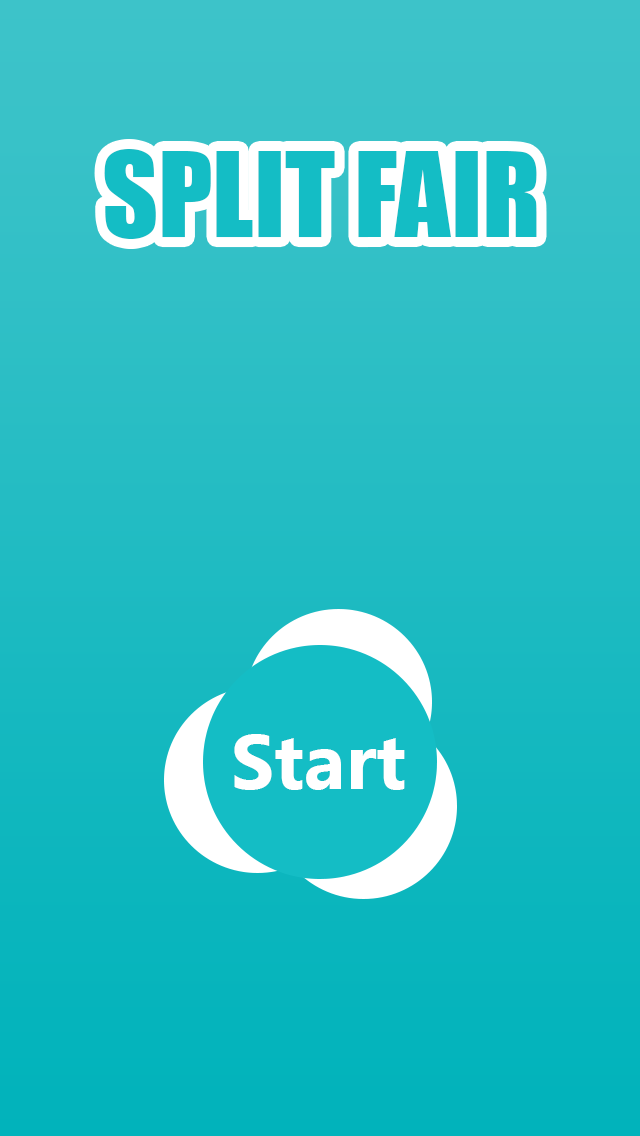
<style>
.page{position:relative;width:640px;height:1136px}
.page>*{position:absolute;margin:0}
.t1{font:108.7px "Impact";color:#14bdc5}
.t2{font:77px "Ebrima-Bold";color:#ffffff}
</style>
<div class="page">
<p class="t1" style="left:104px;top:149px;width:433px;height:90px">SPLIT FAIR</p>
<p class="t2" style="left:234px;top:734px;width:171px;height:56px">Start</p>
</div>
